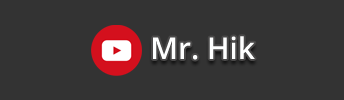
<style>
.page{position:relative;width:344px;height:100px;background:#333333}
.page>*{position:absolute;margin:0}
.t1{font:30px "OpenSans-SemiBold";color:#feffff}
</style>
<div class="page">
<p class="t1" style="left:153px;top:36px;width:102px;height:24px">Mr. Hik</p>
</div>
